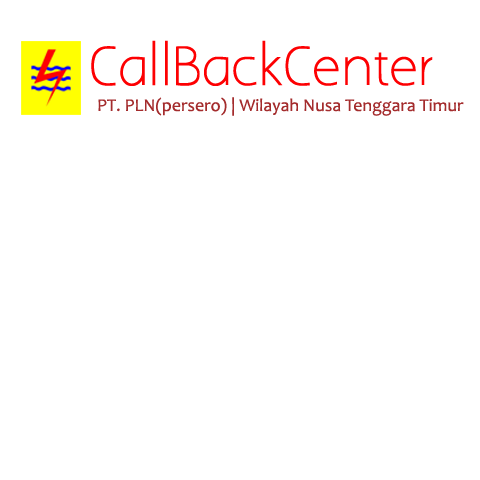
<style>
.page{position:relative;width:480px;height:480px;background:#ffffff}
.page>*{position:absolute;margin:0}
.t1{font:48px "AaarghNormal";color:#fd0002}
.t2{font:18px "Candara";color:#a42c2d}
</style>
<div class="page">
<p class="t1" style="left:91px;top:40px;width:342px;height:46px">CallBackCenter</p>
<p class="t2" style="left:98px;top:97px;width:366px;height:19px">PT. PLN(persero) | Wilayah Nusa Tenggara Timur</p>
</div>
